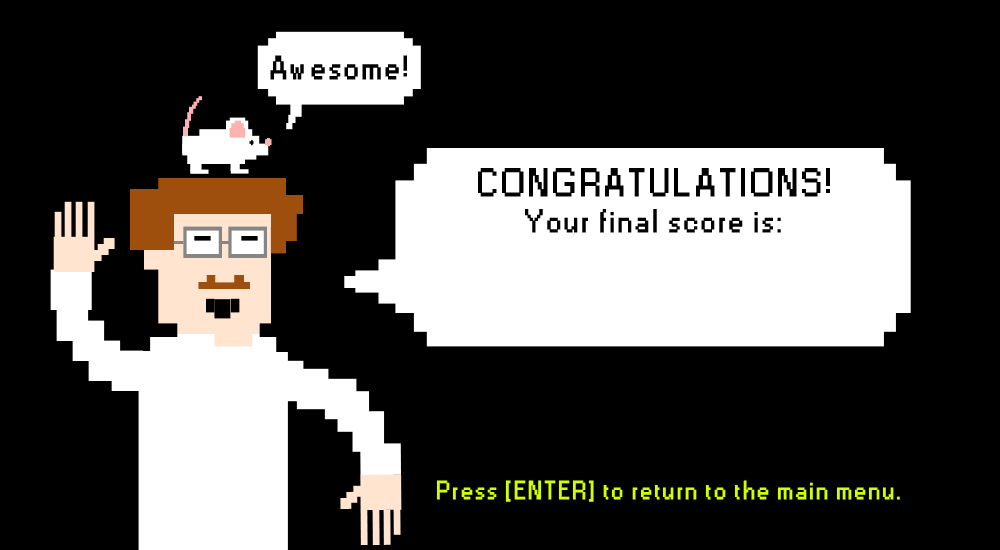
<style>
.page{position:relative;width:1000px;height:550px;background:#000000}
.page>*{position:absolute;margin:0}
.t1{font:31.5px "Small Fonts";letter-spacing:0.1em;color:#000000;font-weight:bold}
.t2{font:30.6px "Small Fonts";letter-spacing:0.1em;color:#000000;font-weight:bold}
.t3{font:37.2px "Small Fonts";letter-spacing:0.1em;color:#000000;font-weight:bold}
.t4{font:24.7px "Small Fonts";letter-spacing:0.1em;color:#d2ff00;font-weight:bold}
</style>
<div class="page">
<p class="t1" style="left:270px;top:55px;width:137px;height:25px">Awesome!</p>
<p class="t2" style="left:478px;top:168px;width:352px;height:65px;text-align:center"><span class="t3">CONGRATULATIONS!<br></span>Your final score is:</p>
<p class="t4" style="left:436px;top:480px;width:464px;height:22px">Press [ENTER] to return to the main menu.</p>
</div>
